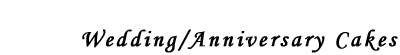
<style>
.page{position:relative;width:400px;height:55px;background:#ffffff}
.page>*{position:absolute;margin:0}
.t1{font:24px "MonotypeCorsiva";letter-spacing:0.1em;color:#000000;font-weight:bold}
</style>
<div class="page">
<p class="t1" style="left:82px;top:29px;width:316px;height:24px">Wedding/Anniversary Cakes</p>
</div>
